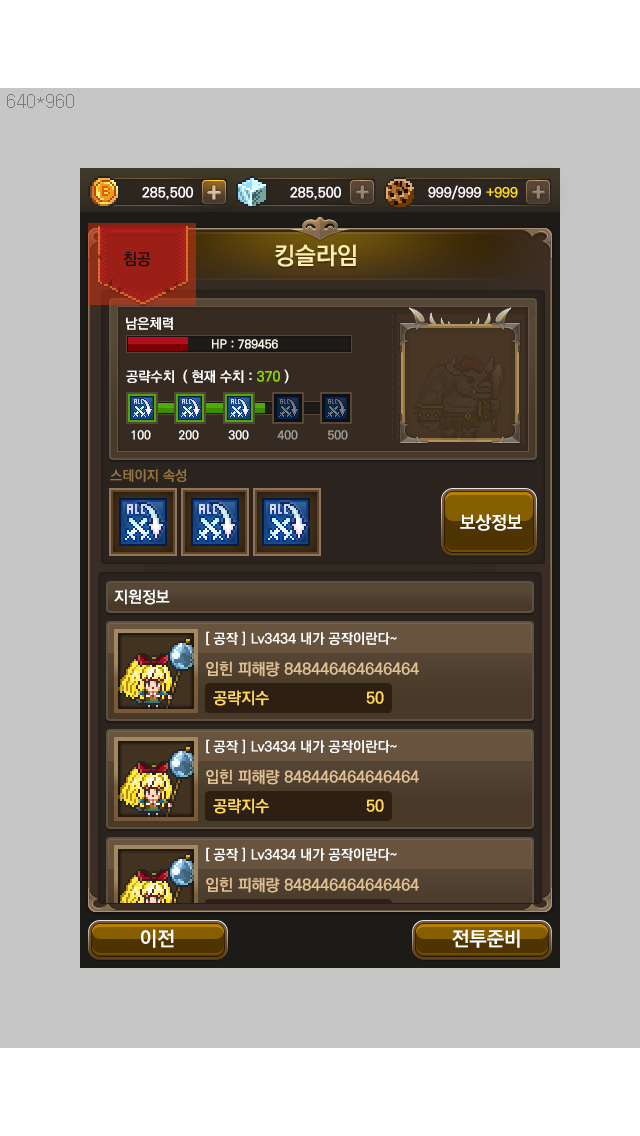
<style>
.page{position:relative;width:640px;height:1136px;background:#c6c6c6}
.page>*{position:absolute;margin:0}
.t1{font:24px "KoPubDotumBold";color:#ffedab}
.t2{font:16px "KoPubDotumBold";color:#1b0e0f}
.t3{font:14px "KoPubDotumBold";color:#fefefe}
.t4{font:12px "KoPubDotumBold";color:#fffcee}
.t5{font:14px "KoPubDotumBold";color:#ffffff}
.t6{font:14px "KoPubDotumBold";color:#8ae001}
.t7{font:12px "KoPubDotumBold";color:#fefefe}
.t8{font:12px "KoPubDotumBold";color:#a09f9d}
.t9{font:14px "KoPubDotumBold";color:#947441}
.t10{font:18px "KoPubDotumBold";color:#ffffff}
.t11{font:16px "KoPubDotumBold";color:#ffffff}
.t12{font:16px "KoPubDotumBold";color:#e1c093}
.t13{font:16px "KoPubDotumBold";color:#ffda5b}
.t14{font:20px "KoPubDotumBold";color:#ffffff}
</style>
<div class="page">
<p class="t1" style="left:275px;top:244px;width:81px;height:23px">킹슬라임</p>
<p class="t2" style="left:123px;top:251px;width:28px;height:16px">침공</p>
<p class="t3" style="left:126px;top:317px;width:47px;height:13px">남은체력</p>
<p class="t4" style="left:212px;top:339px;width:66px;height:10px">HP : 789456</p>
<p class="t3" style="left:126px;top:370px;width:48px;height:13px">공략수치</p>
<p class="t5" style="left:183px;top:369px;width:106px;height:15px">( 현재 수치 : <span class="t6">370</span> )</p>
<p class="t7" style="left:131px;top:430px;width:20px;height:10px">100</p>
<p class="t7" style="left:179px;top:430px;width:20px;height:10px">200</p>
<p class="t7" style="left:228px;top:430px;width:21px;height:10px">300</p>
<p class="t8" style="left:277px;top:430px;width:21px;height:10px">400</p>
<p class="t8" style="left:328px;top:430px;width:20px;height:10px">500</p>
<p class="t9" style="left:110px;top:469px;width:77px;height:13px">스테이지 속성</p>
<p class="t10" style="left:460px;top:514px;width:62px;height:17px">보상정보</p>
<p class="t11" style="left:114px;top:589px;width:56px;height:16px">지원정보</p>
<p class="t5" style="left:206px;top:631px;width:191px;height:15px">[ 공작 ] Lv3434 내가 공작이란다~</p>
<p class="t12" style="left:206px;top:661px;width:213px;height:16px">입힌 피해량 848446464646464</p>
<p class="t13" style="left:213px;top:690px;width:56px;height:16px">공략지수</p>
<p class="t13" style="left:366px;top:691px;width:18px;height:13px">50</p>
<p class="t14" style="left:141px;top:929px;width:33px;height:19px">이전</p>
<p class="t14" style="left:452px;top:929px;width:68px;height:19px">전투준비</p>
</div>
